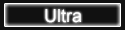
<style>
.page{position:relative;width:125px;height:30px;background:#111111}
.page>*{position:absolute;margin:0}
.t1{font:18px "ArialMT";color:#ffffff}
</style>
<div class="page">
<p class="t1" style="left:45px;top:9px;width:37px;height:14px">Ultra</p>
</div>
